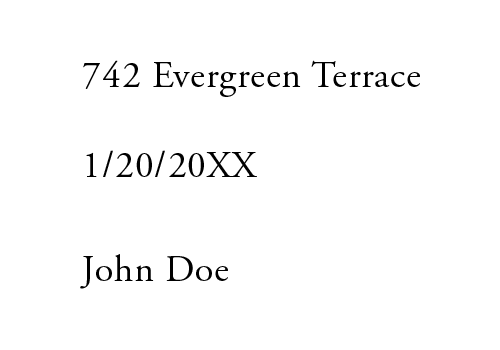
<style>
.page{position:relative;width:500px;height:350px;background:#ffffff}
.page>*{position:absolute;margin:0}
.t1{font:37.5px "AGaramondPro-Regular";letter-spacing:0.025em;color:#000000}
.t2{font:37.5px/34.6px "AGaramondPro-Regular";letter-spacing:0.025em;color:#000000}
</style>
<div class="page">
<p class="t1" style="left:80px;top:60px;width:340px;height:229px">742 Evergreen Terrace<br><br>1/20/20XX<br><span class="t2"><br><br>John Doe</span></p>
</div>
